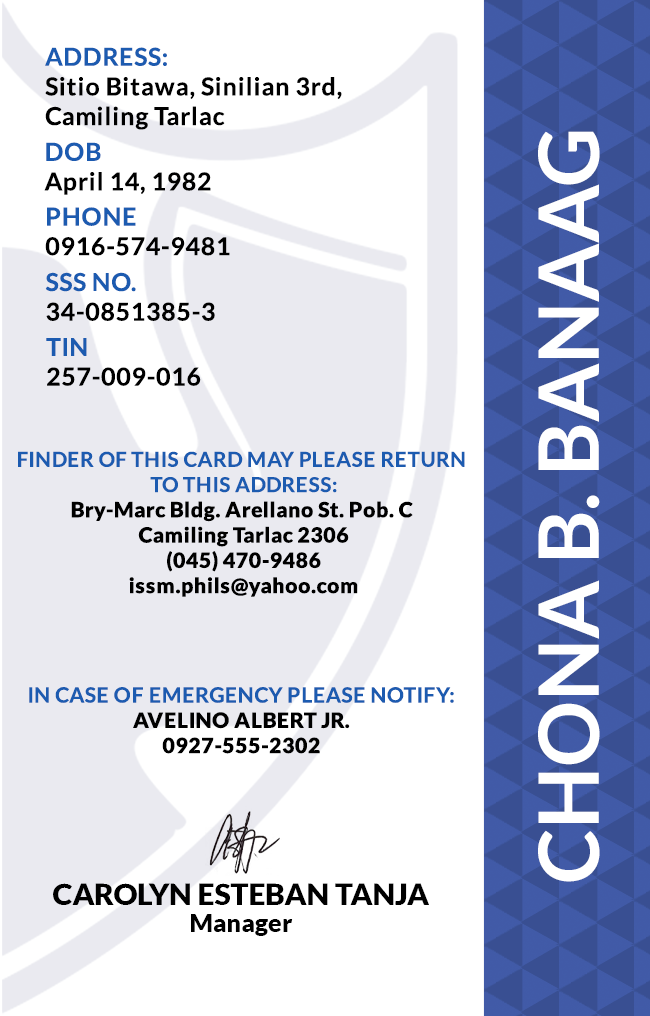
<style>
.page{position:relative;width:650px;height:1016px;background:#ffffff}
.page>*{position:absolute;margin:0}
.t1{font:24.7px/29.6px "Lato-Bold";letter-spacing:0.025em;color:#000000}
.t2{font:24.7px/29.6px "Lato-Bold";letter-spacing:0.025em;color:#1c5bb0}
.t3{font:83.3px "Lato-Bold";color:#ffffff}
.t4{font:21.1px "Lato-Black";letter-spacing:0.025em}
.t5{font:20.5px/25.3px "Lato-Bold";letter-spacing:0.025em;text-transform:uppercase}
.t6{font:21.1px/25.3px "Lato-Bold";letter-spacing:0.025em;color:#1c5bb0}
.t7{font:21.1px "Lato-Black";letter-spacing:0.025em;color:#000000}
.t8{font:29.5px "Lato-Black";color:#000000}
.t9{font:25px "Lato-Black";color:#000000}
</style>
<div class="page">
<p class="t1" style="left:45px;top:47px;width:297px;height:83px"><span class="t2">ADDRESS:<br></span>Sitio Bitawa, Sinilian 3rd,<br>Camiling Tarlac</p>
<p class="t3" style="left:538px;top:131px;width:62px;height:751px;rotate:-90deg">CHONA B. BANAAG</p>
<p class="t1" style="left:44px;top:142px;width:167px;height:53px"><span class="t2">DOB<br></span>April 14, 1982</p>
<p class="t1" style="left:45px;top:207px;width:185px;height:49px"><span class="t2">PHONE <br></span>0916-574-9481</p>
<p class="t1" style="left:45px;top:272px;width:170px;height:49px"><span class="t2">SSS NO.<br></span>34-0851385-3</p>
<p class="t1" style="left:46px;top:338px;width:155px;height:48px"><span class="t2">TIN<br></span>257-009-016</p>
<p class="t4" style="left:18px;top:451px;width:447px;height:146px;text-align:center"><span class="t5">Finder of this card may please return <br>to this address:<br></span>Bry-Marc Bldg. Arellano St. Pob. C <br>Camiling Tarlac 2306<br>(045) 470-9486<br>issm.phils@yahoo.com</p>
<p class="t6" style="left:29px;top:687px;width:425px;height:67px;text-align:center">IN CASE OF EMERGENCY PLEASE NOTIFY:<br><span class="t7">AVELINO ALBERT JR.<br>0927-555-2302</span></p>
<p class="t8" style="left:53px;top:883px;width:376px;height:22px">CAROLYN ESTEBAN TANJA</p>
<p class="t9" style="left:191px;top:914px;width:102px;height:22px">Manager</p>
</div>
